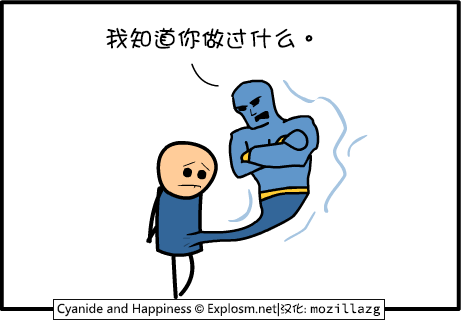
<style>
.page{position:relative;width:462px;height:321px;background:#ffffff}
.page>*{position:absolute;margin:0}
.t1{font:24px "DFGirl";color:#000000}
</style>
<div class="page">
<p class="t1" style="left:106px;top:27px;width:207px;height:22px">我知道你做过什么。</p>
</div>
